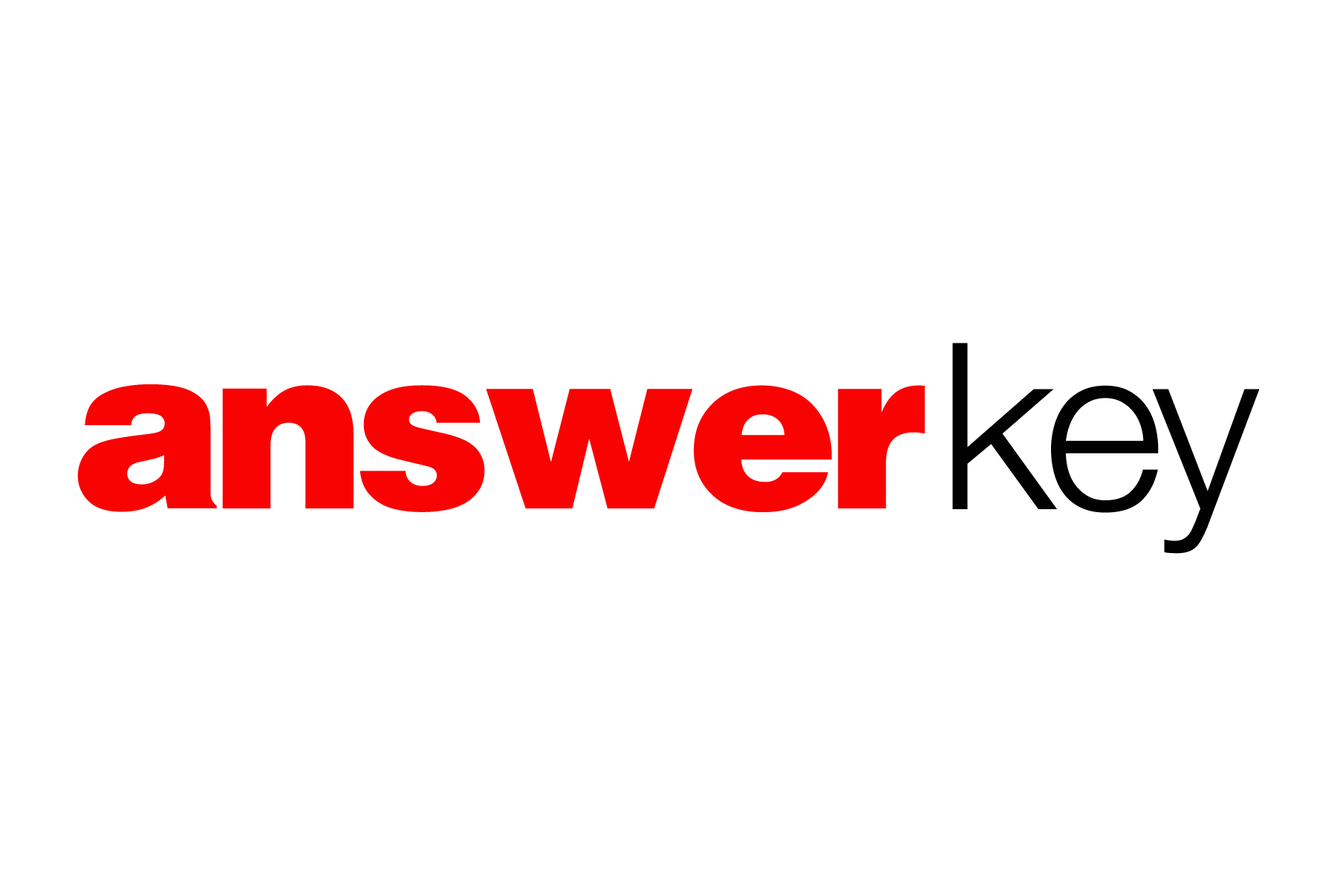
<style>
.page{position:relative;width:1337px;height:892px;background:#ffffff}
.page>*{position:absolute;margin:0}
.t1{font:232.2px "HelveticaNeue-Light";letter-spacing:-0.05em;color:#010101}
.t2{font:232.2px "Helvetica-Black";letter-spacing:-0.06em;color:#f90202}
</style>
<div class="page">
<p class="t1" style="left:953px;top:343px;width:307px;height:211px">key</p>
<p class="t2" style="left:77px;top:384px;width:848px;height:128px">answer</p>
</div>
